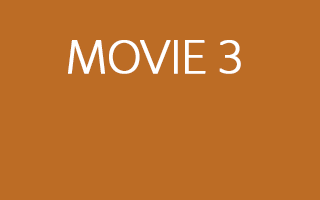
<style>
.page{position:relative;width:320px;height:200px;background:#bc6c25}
.page>*{position:absolute;margin:0}
.t1{font:50px "AdobeClean-Light";letter-spacing:-0.02em;color:#ffffff;font-weight:bold}
</style>
<div class="page">
<p class="t1" style="left:68px;top:40px;width:173px;height:34px">MOVIE 3</p>
</div>
